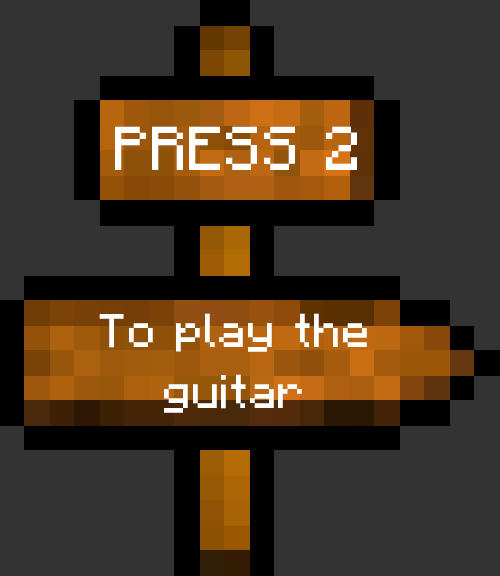
<style>
.page{position:relative;width:500px;height:576px;background:#333333}
.page>*{position:absolute;margin:0}
.t1{font:62.1px "Minecraft-Regular";color:#ffffff}
.t2{font:47.5px/61.2px "Minecraft-Regular";color:#ffffff}
</style>
<div class="page">
<p class="t1" style="left:115px;top:126px;width:242px;height:44px">PRESS 2</p>
<p class="t2" style="left:99px;top:313px;width:268px;height:100px;text-align:center">To play the<br>guitar</p>
</div>
